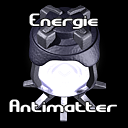
<style>
.page{position:relative;width:128px;height:128px;background:#000000}
.page>*{position:absolute;margin:0}
.t1{font:18px "GravitateBRK";color:#ffffff}
</style>
<div class="page">
<p class="t1" style="left:29px;top:13px;width:69px;height:16px">Energie</p>
<p class="t1" style="left:9px;top:99px;width:108px;height:13px">Antimatter</p>
</div>
